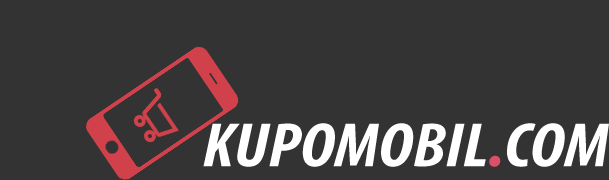
<style>
.page{position:relative;width:609px;height:180px;background:#333333}
.page>*{position:absolute;margin:0}
.t1{font:47.3px "MyriadPro-BoldCondIt";color:#ffffff;scale:1.13 1}
.t2{font:47.3px "MyriadPro-BoldCondIt";color:#da5069;scale:1.13 1}
</style>
<div class="page">
<p class="t1" style="left:203px;top:123px;width:406px;height:44px">KUPOMOBIL<span class="t2">.</span>COM</p>
</div>
